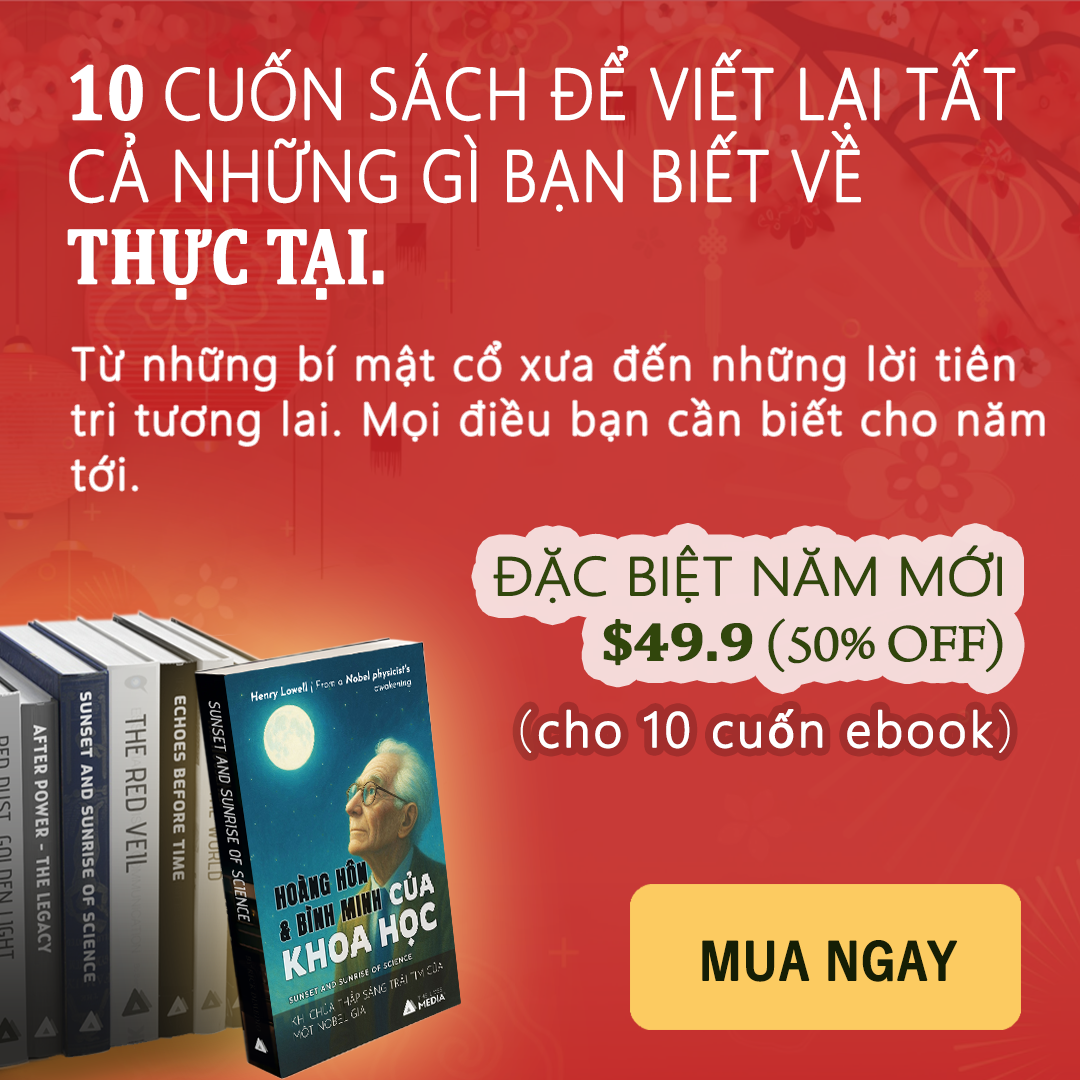
<style>
.page{position:relative;width:1080px;height:1080px}
.page>*{position:absolute;margin:0}
.t1{font:72px/82px "SegoeUI-Light";color:#ffffff;font-weight:bold;scale:0.9 1}
.t2{font:79.2px/82px "Cambria-Bold";color:#ffffff;font-weight:bold;scale:0.82 1}
.t3{font:45px/55px "SegoeUI-Light";letter-spacing:0.05em;color:#ffffff;font-weight:bold}
.t4{font:54px/65px "SegoeUI-Light";letter-spacing:-0.025em;color:#31460c;font-weight:bold;scale:1.11 1}
.t5{font:54px/65px "Cambria-Bold";letter-spacing:-0.025em;color:#31460c;font-weight:bold;scale:1.11 1}
.t6{font:54px/65px "ArnoPro-LightDisplay";letter-spacing:-0.025em;color:#31460c;font-weight:bold;scale:1.11 1}
.t7{font:48px "MalgunGothic-Semilight";letter-spacing:0.05em;color:#ffffff;font-weight:bold}
.t8{font:48px "Chogokuboso-Gothic";letter-spacing:0.05em;color:#ffffff;font-weight:bold}
.t9{font:48px "MyriadPro-Regular";letter-spacing:0.05em;color:#ffffff;font-weight:bold}
.t10{font:50px "YuGothic-Bold";color:#151e05;font-weight:bold;scale:0.9 1}
</style>
<div class="page">
<p class="t1" style="left:67px;top:45px;width:949px;height:255px"><span class="t2">10 </span>CUỐN SÁCH ĐỂ VIẾT LẠI TẤT CẢ NHỮNG GÌ BẠN BIẾT VỀ <span class="t2">THỰC TẠI.</span></p>
<p class="t3" style="left:71px;top:341px;width:973px;height:150px">Từ những bí mật cổ xưa đến những lời tiên tri tương lai. Mọi điều bạn cần biết cho năm tới.</p>
<p class="t4" style="left:493px;top:545px;width:510px;height:128px;text-align:right">ĐẶC BIỆT NĂM MỚI<br> <span class="t5">$49.9</span><span class="t6"> (50% OFF)</span></p>
<p class="t7" style="left:520px;top:709px;width:490px;height:44px"><span class="t8">(</span>cho 10 cu<span class="t9">ố</span>n ebook<span class="t8">)</span></p>
<p class="t10" style="left:702px;top:940px;width:256px;height:42px">MUA NGAY</p>
</div>
